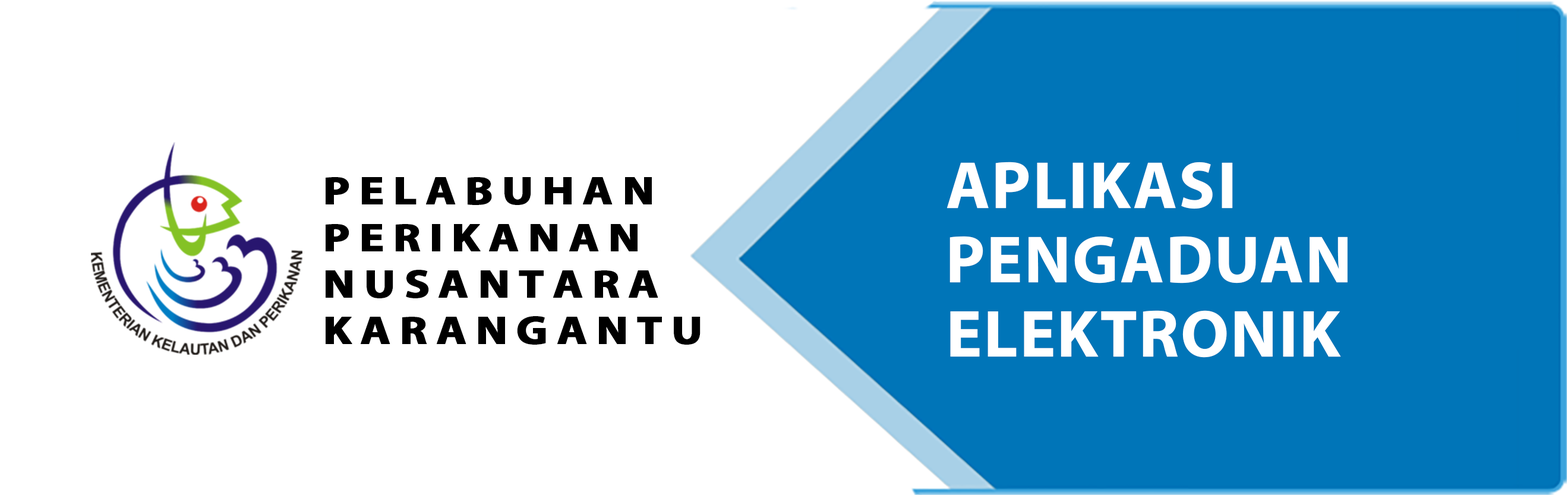
<style>
.page{position:relative;width:1568px;height:495px;background:#ffffff}
.page>*{position:absolute;margin:0}
.t1{font:67.1px/74.2px "MyriadPro-Bold";color:#ffffff;font-weight:bold}
.t2{font:40px/46.5px "MyriadPro-Bold";letter-spacing:0.18em;color:#000000;font-weight:bold;scale:1.14 1}
</style>
<div class="page">
<p class="t1" style="left:947px;top:162px;width:401px;height:196px">APLIKASI<br>PENGADUAN<br>ELEKTRONIK</p>
<p class="t2" style="left:326px;top:177px;width:375px;height:168px">PELABUHAN<br>PERIKANAN<br>NUSANTARA<br>KARANGANTU</p>
</div>
